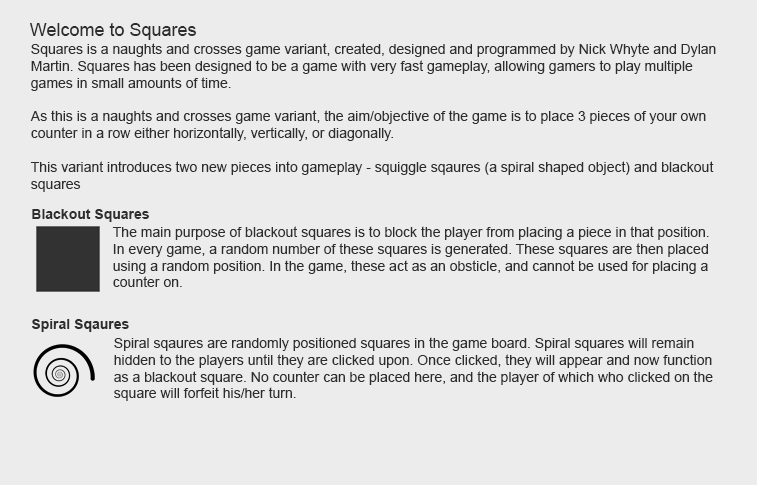
<style>
.page{position:relative;width:757px;height:485px;background:#ececec}
.page>*{position:absolute;margin:0}
.t1{font:18px "ArialMT";color:#2d2d2d}
.t2{font:14px "ArialMT";color:#2d2d2d}
.t3{font:14px "Arial-BoldMT";color:#2d2d2d}
</style>
<div class="page">
<p class="t1" style="left:30px;top:23px;width:166px;height:17px">Welcome to Squares</p>
<p class="t2" style="left:30px;top:43px;width:686px;height:149px">Squares is a naughts and crosses game variant, created, designed and programmed by Nick Whyte and Dylan Martin. Squares has been designed to be a game with very fast gameplay, allowing gamers to play multiple games in small amounts of time.<br><br>As this is a naughts and crosses game variant, the aim/objective of the game is to place 3 pieces of your own counter in a row either horizontally, vertically, or diagonally.<br><br>This variant introduces two new pieces into gameplay - squiggle sqaures (a spiral shaped object) and blackout squares</p>
<p class="t3" style="left:32px;top:209px;width:117px;height:13px">Blackout Squares</p>
<p class="t2" style="left:112px;top:226px;width:597px;height:61px">The main purpose of blackout squares is to block the player from placing a piece in that position. In every game, a random number of these squares is generated. These squares are then placed using a random position. In the game, these act as an obsticle, and cannot be used for placing a counter on.</p>
<p class="t3" style="left:32px;top:319px;width:97px;height:13px">Spiral Sqaures</p>
<p class="t2" style="left:114px;top:337px;width:599px;height:64px">Spiral sqaures are randomly positioned squares in the game board. Spiral squares will remain hidden to the players until they are clicked upon. Once clicked, they will appear and now function as a blackout square. No counter can be placed here, and the player of which who clicked on the square will forfeit his/her turn.</p>
</div>
